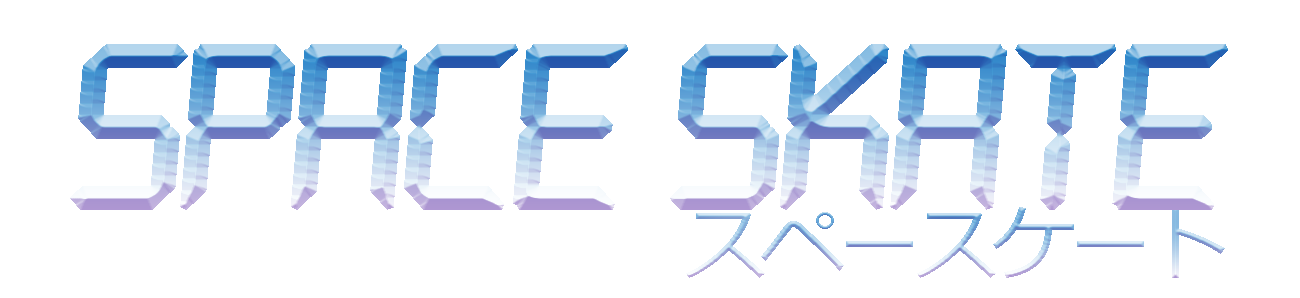
<style>
.page{position:relative;width:1300px;height:298px;background:#ffffff}
.page>*{position:absolute;margin:0}
.t1{font:250px "DS-Digital-Italic";letter-spacing:-0.075em;font-weight:bold}
.t2{font:83.3px "Meiryo";letter-spacing:-0.075em}
</style>
<div class="page">
<p class="t1" style="left:70px;top:44px;width:1158px;height:166px">space skate</p>
<p class="t2" style="left:686px;top:207px;width:539px;height:71px">スペースケート</p>
</div>
